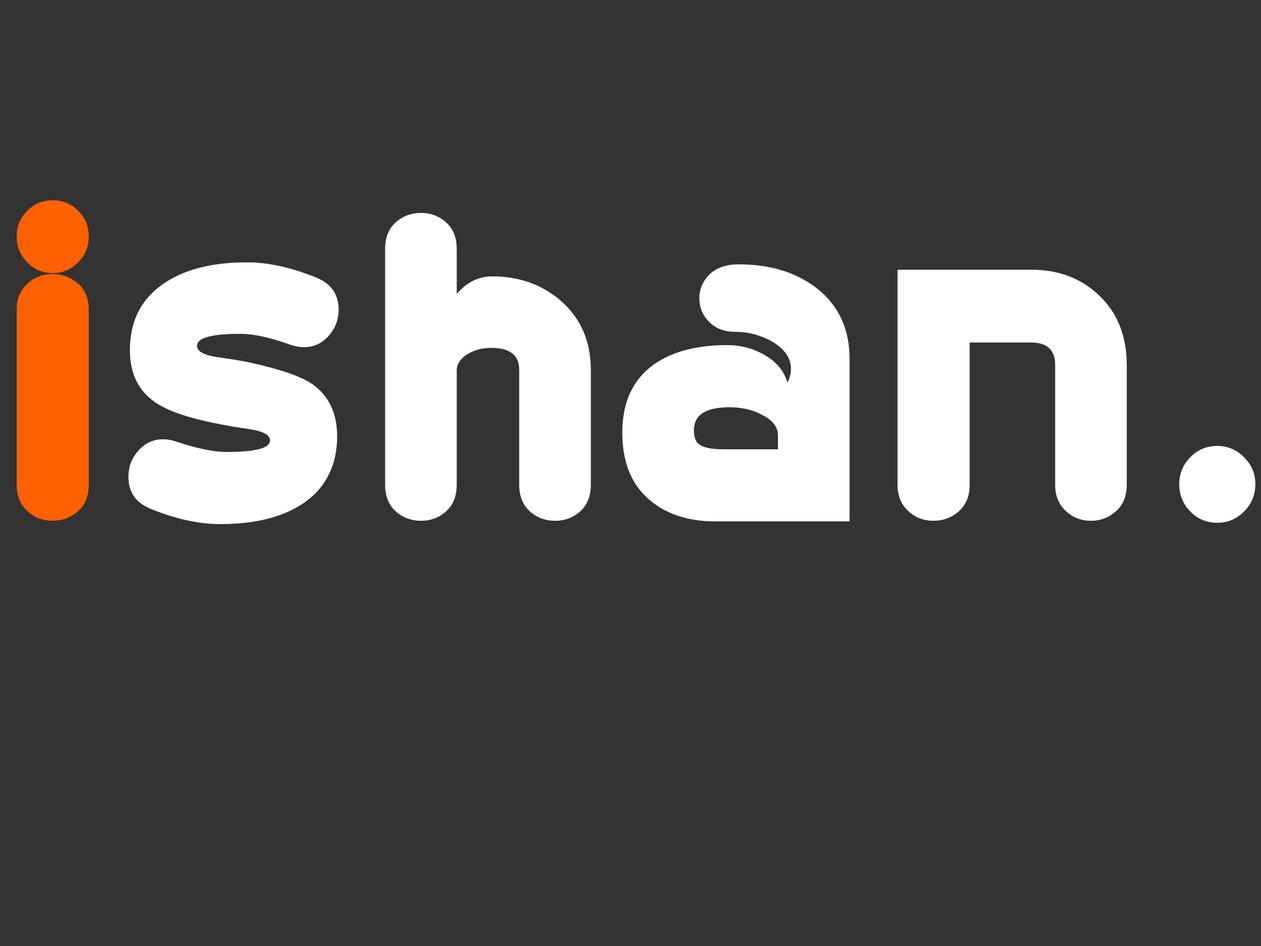
<style>
.page{position:relative;width:1261px;height:946px;background:#333333}
.page>*{position:absolute;margin:0}
.t1{font:500.5px "20thCenturyFontBold";color:#ffffff}
.t2{font:500.5px "20thCenturyFontBold";color:#ff6000}
</style>
<div class="page">
<p class="t1" style="left:17px;top:200px;width:1239px;height:324px"><span class="t2">i</span>shan.</p>
</div>
